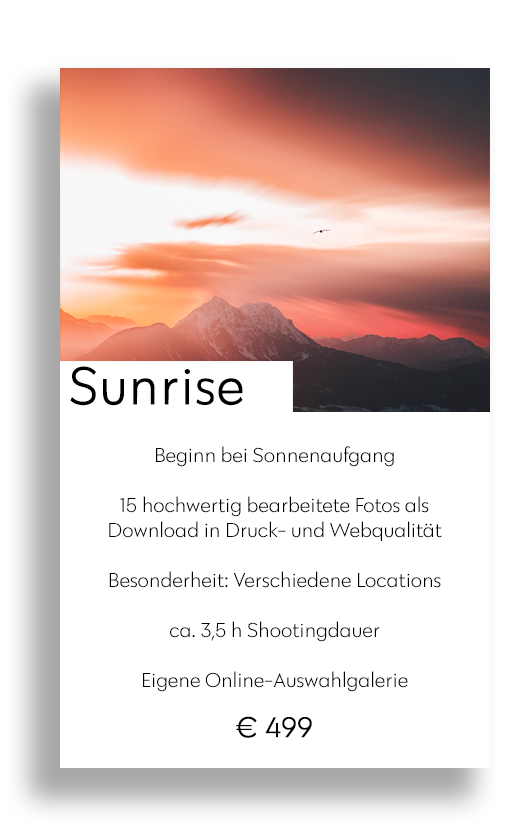
<style>
.page{position:relative;width:532px;height:825px;background:#ffffff}
.page>*{position:absolute;margin:0}
.t1{font:54.4px "Klik-Light";color:#000000;font-weight:bold}
.t2{font:20.8px/50px "Klik-Light";color:#000000}
.t3{font:20.8px "Klik-Light";color:#000000}
.t4{font:29.2px/50px "Klik-Light";color:#000000;font-weight:bold}
</style>
<div class="page">
<p class="t1" style="left:70px;top:366px;width:173px;height:40px">Sunrise</p>
<p class="t2" style="left:109px;top:446px;width:333px;height:292px;text-align:center">Beginn bei Sonnenaufgang<br>15 hochwertig bearbeitete Fotos als<br><span class="t3">Download in Druck- und Webqualität<br></span>Besonderheit: Verschiedene Locations<br>ca. 3,5 h Shootingdauer<br>Eigene Online-Auswahlgalerie<br><span class="t4">€ 499</span></p>
</div>
